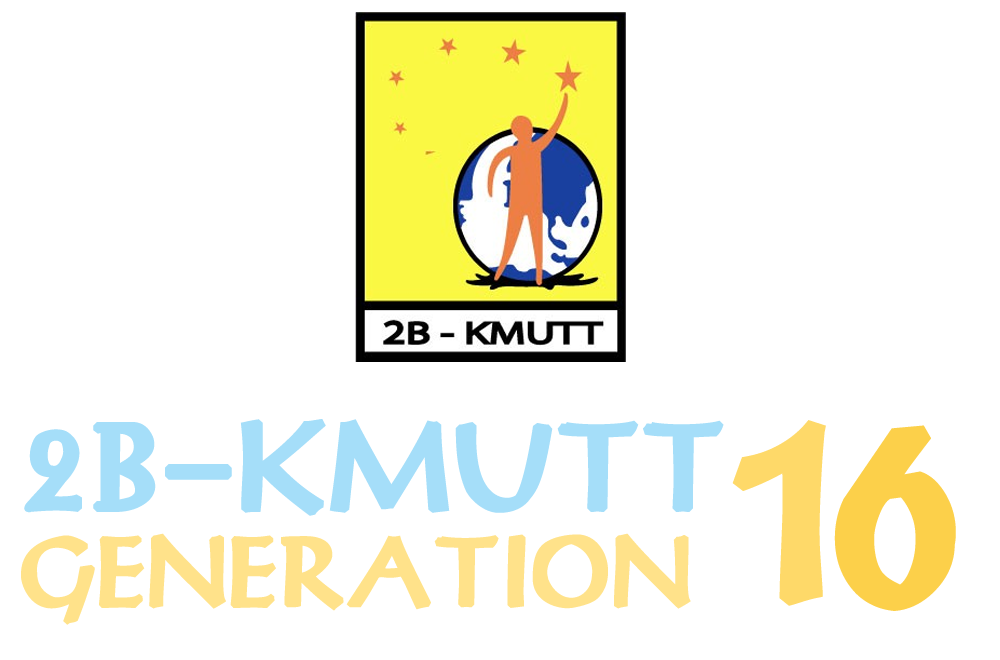
<style>
.page{position:relative;width:1000px;height:660px;background:#ffffff}
.page>*{position:absolute;margin:0}
.t1{font:263.6px "XJS-Macha";color:#a5def9;font-weight:bold}
.t2{font:569.8px "XJS-Macha";color:#fed969;font-weight:bold}
.t3{font:569.8px "XJS-Macha";color:#fcd04a;font-weight:bold}
.t4{font:208.2px "XJS-Macha";color:#ffe28a;font-weight:bold}
</style>
<div class="page">
<p class="t1" style="left:24px;top:419px;width:700px;height:97px">2B-KMUTT</p>
<p class="t2" style="left:732px;top:420px;width:94px;height:186px">1</p>
<p class="t3" style="left:834px;top:425px;width:122px;height:186px">6</p>
<p class="t4" style="left:21px;top:533px;width:670px;height:92px">GENERATION</p>
</div>
